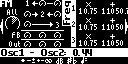
<style>
.page{position:relative;width:128px;height:64px;background:#000000}
.page>*{position:absolute;margin:0}
.t1{font:15px "MatchupPro";color:#ffffff}
.t2{font:15px "Eighties";color:#ffffff}
.t3{font:15px "MatchupPro";color:#000000}
.t4{font:15px "Eighties";color:#000000}
</style>
<div class="page">
<p class="t1" style="left:0px;top:0px;width:12px;height:7px">FM</p>
<p class="t2" style="left:26px;top:0px;width:3px;height:6px">1</p>
<p class="t3" style="left:63px;top:1px;width:8px;height:24px;rotate:-90deg">Freq</p>
<p class="t4" style="left:72px;top:5px;width:3px;height:6px">1</p>
<p class="t2" style="left:7px;top:9px;width:10px;height:6px">All</p>
<p class="t2" style="left:41px;top:11px;width:3px;height:6px">2</p>
<p class="t2" style="left:79px;top:8px;width:18px;height:6px">10.75</p>
<p class="t2" style="left:56px;top:22px;width:3px;height:6px">3</p>
<p class="t2" style="left:56px;top:22px;width:3px;height:6px">3</p>
<p class="t4" style="left:72px;top:21px;width:3px;height:6px">2</p>
<p class="t2" style="left:79px;top:24px;width:18px;height:6px">10.75</p>
<p class="t2" style="left:102px;top:24px;width:21px;height:6px">11050</p>
<p class="t2" style="left:9px;top:41px;width:11px;height:6px">Out</p>
<p class="t2" style="left:12px;top:32px;width:8px;height:6px">FB</p>
<p class="t4" style="left:72px;top:37px;width:3px;height:6px">3</p>
<p class="t2" style="left:79px;top:40px;width:18px;height:6px">10.75</p>
<p class="t2" style="left:102px;top:40px;width:21px;height:6px">11050</p>
<p class="t3" style="left:1px;top:49px;width:91px;height:7px">Osc1 - Osc2: 0.44</p>
<p class="t1" style="left:21px;top:59px;width:10px;height:3px">+-</p>
</div>
